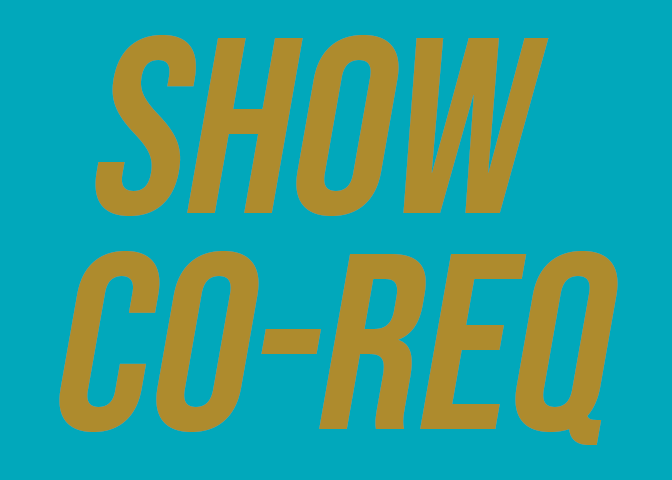
<style>
.page{position:relative;width:672px;height:480px;background:#01a8bb}
.page>*{position:absolute;margin:0}
.t1{font:250px/216px "BebasNeue-Regular";color:#ae8b2d;font-style:italic}
</style>
<div class="page">
<p class="t1" style="left:59px;top:35px;width:559px;height:410px;text-align:center">SHOW <br>CO-REQ</p>
</div>
